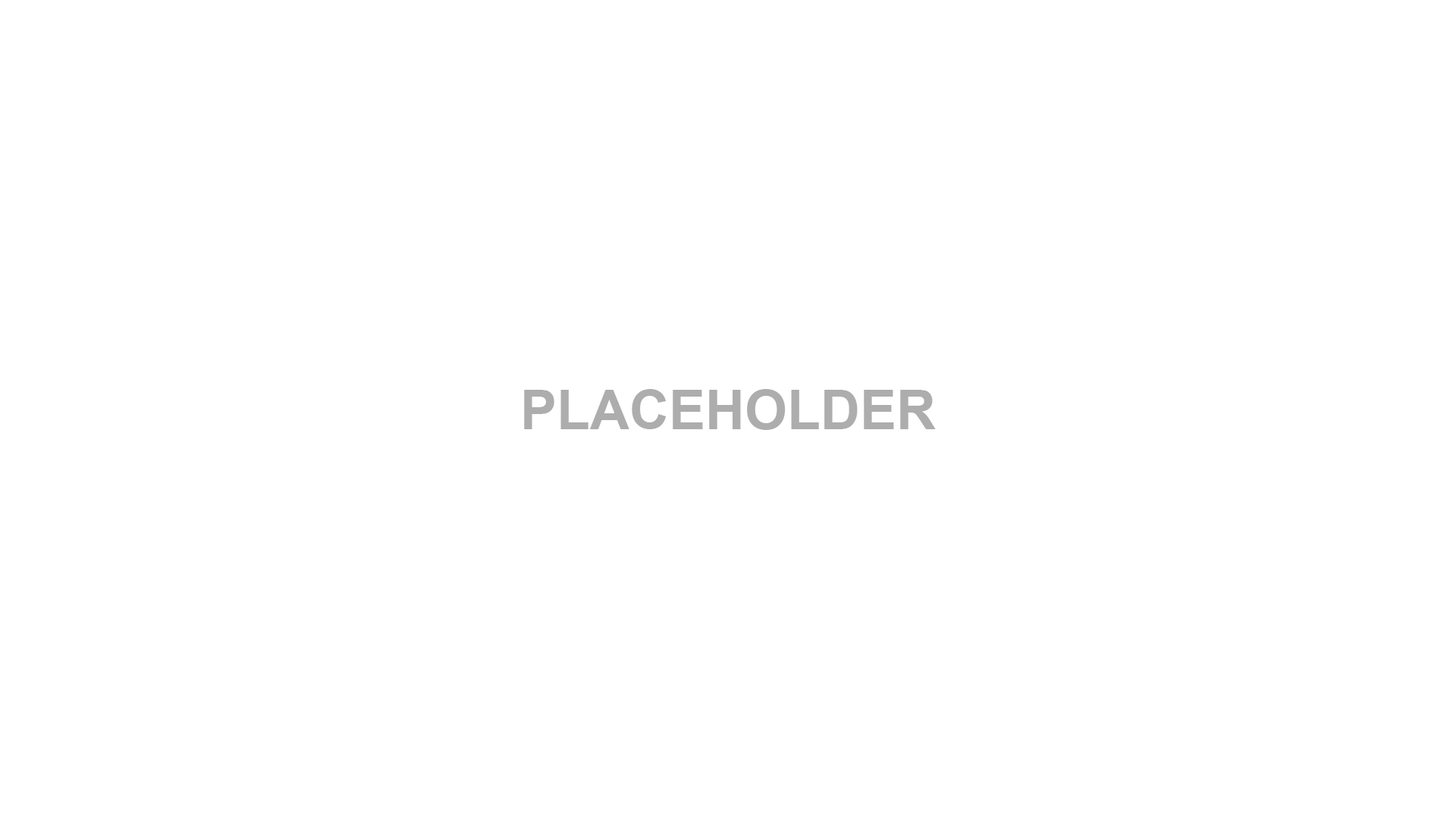
<style>
.page{position:relative;width:1456px;height:819px;background:#ffffff}
.page>*{position:absolute;margin:0}
.t1{font:54.6px "Arial-BoldMT";color:#adadad}
</style>
<div class="page">
<p class="t1" style="left:524px;top:389px;width:412px;height:41px">PLACEHOLDER</p>
</div>
